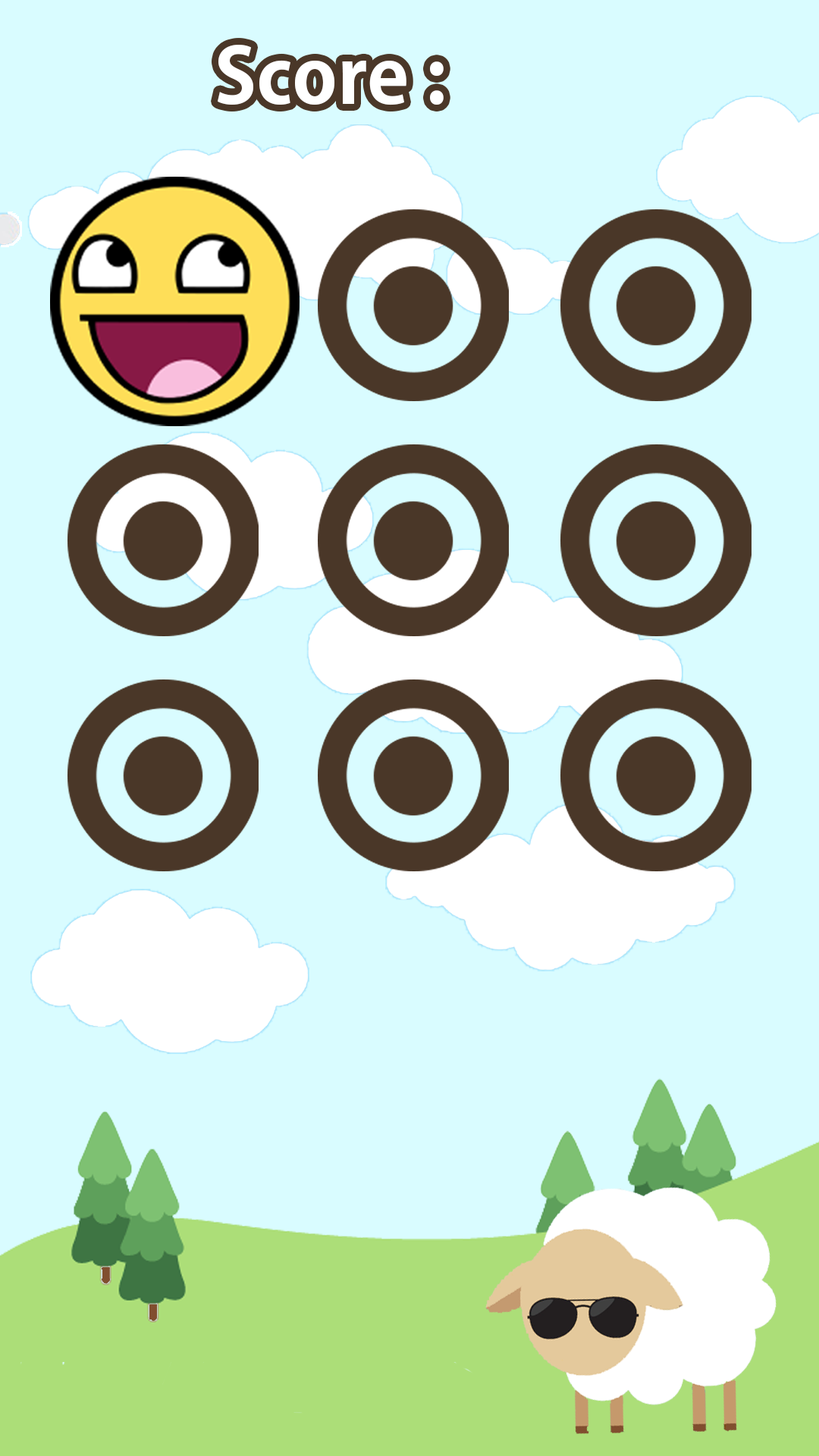
<style>
.page{position:relative;width:819px;height:1456px;background:#d9fcff}
.page>*{position:absolute;margin:0}
.t1{font:76.2px "AdobeGothicStd-Bold";color:#ffffff}
</style>
<div class="page">
<p class="t1" style="left:218px;top:45px;width:226px;height:60px">Score :</p>
</div>
